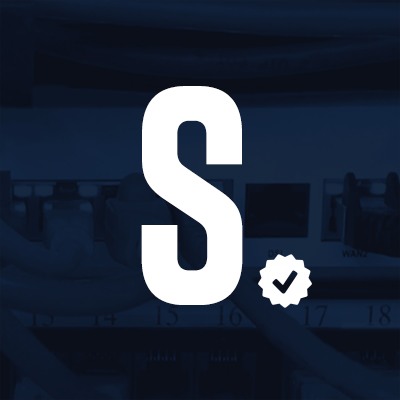
<style>
.page{position:relative;width:400px;height:400px}
.page>*{position:absolute;margin:0}
.t1{font:390px "Tungsten-Semibold";color:#ffffff;scale:0.92 1}
</style>
<div class="page">
<p class="t1" style="left:141px;top:86px;width:102px;height:219px">s</p>
</div>
